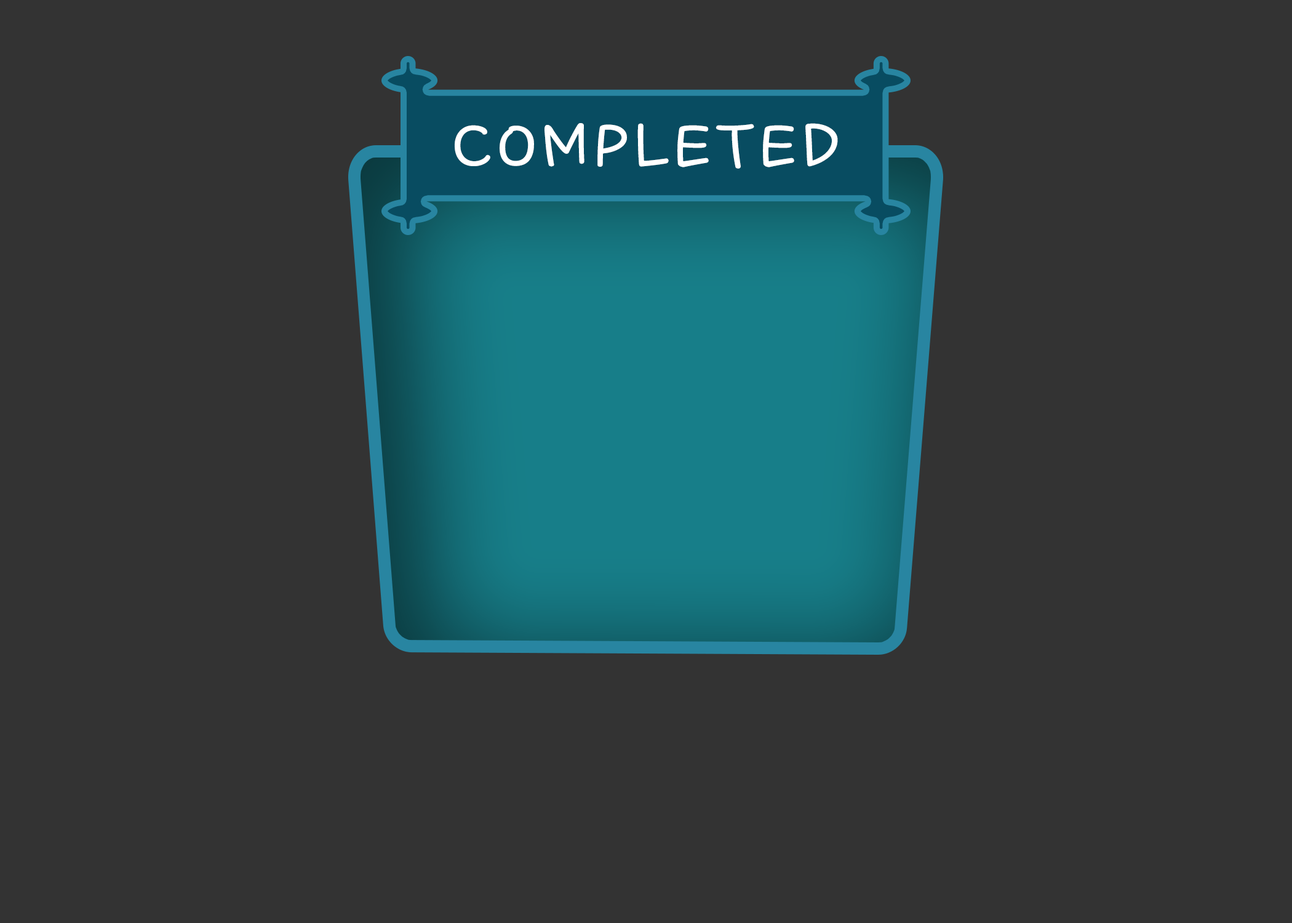
<style>
.page{position:relative;width:1292px;height:923px;background:#333333}
.page>*{position:absolute;margin:0}
.t1{font:61.5px "Chococooky";letter-spacing:0.06em;color:#ffffff;scale:1.13 1}
</style>
<div class="page">
<p class="t1" style="left:455px;top:123px;width:383px;height:46px">COMPLETED</p>
</div>
